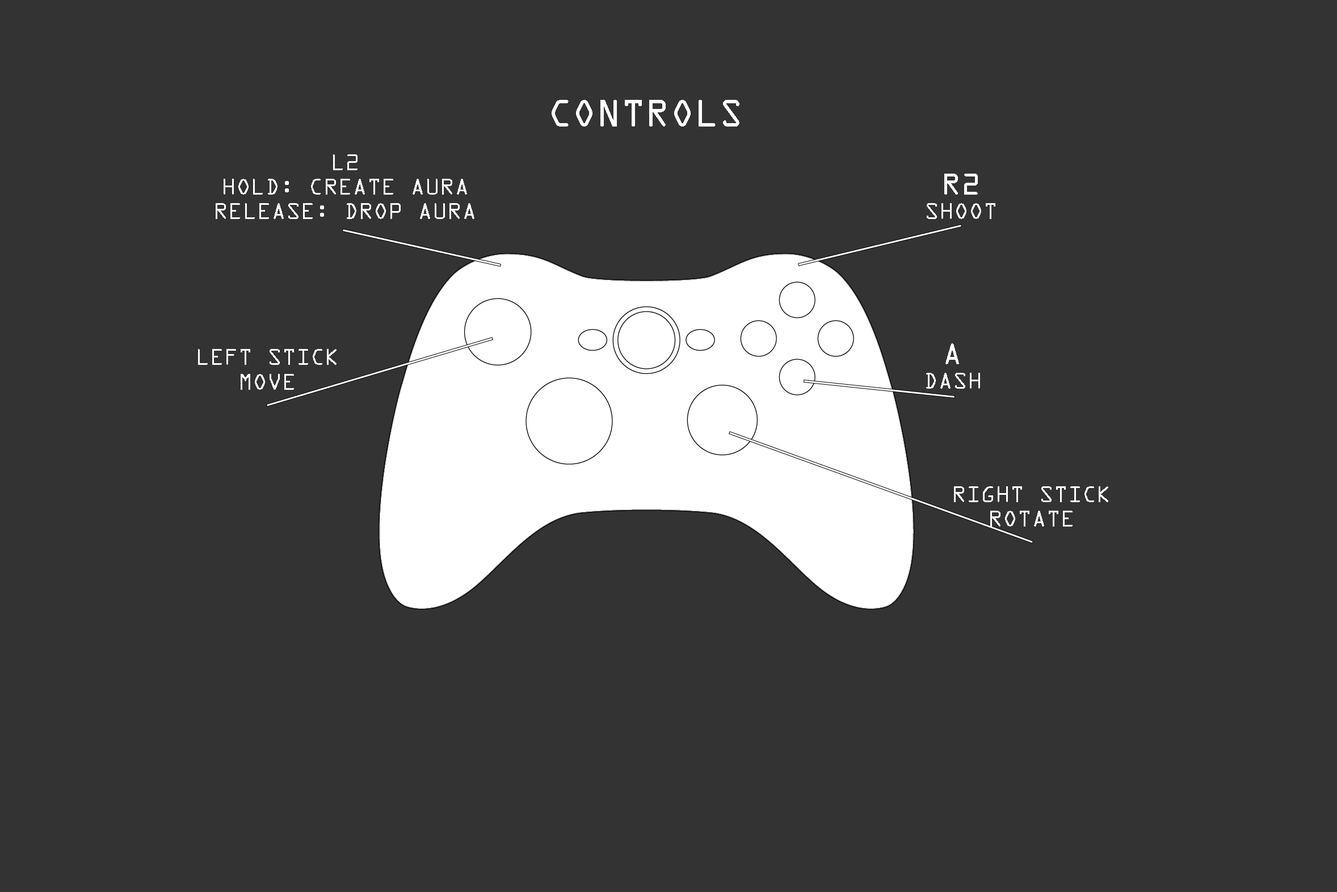
<style>
.page{position:relative;width:1337px;height:892px;background:#333333}
.page>*{position:absolute;margin:0}
.t1{font:34px "OCRAStd";color:#ffffff}
.t2{font:20.4px "OCRAStd";color:#ffffff}
.t3{font:27.2px "OCRAStd";color:#ffffff}
</style>
<div class="page">
<p class="t1" style="left:552px;top:100px;width:187px;height:27px">CONTROLS</p>
<p class="t2" style="left:216px;top:154px;width:258px;height:65px;text-align:center">L2<br>HOLD: CREATE AURA<br>RELEASE: DROP AURA</p>
<p class="t2" style="left:927px;top:174px;width:68px;height:45px;text-align:center"><span class="t3">R2<br></span>SHOOT</p>
<p class="t2" style="left:198px;top:349px;width:138px;height:41px;text-align:center">LEFT STICK<br>MOVE</p>
<p class="t2" style="left:926px;top:343px;width:54px;height:46px;text-align:center"><span class="t3">A<br></span>DASH</p>
<p class="t2" style="left:954px;top:486px;width:154px;height:41px;text-align:center">RIGHT STICK<br>ROTATE</p>
</div>
